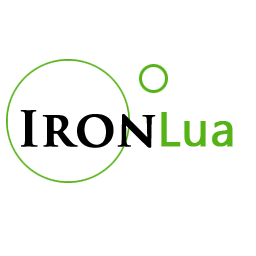
<style>
.page{position:relative;width:256px;height:256px;background:#ffffff}
.page>*{position:absolute;margin:0}
.t1{font:48px "TrajanPro-Bold";color:#000000;font-weight:bold}
.t2{font:48px "Gadugi";color:#55b217;font-weight:bold}
</style>
<div class="page">
<p class="t1" style="left:20px;top:110px;width:213px;height:38px">Iron<span class="t2">Lua</span></p>
</div>
